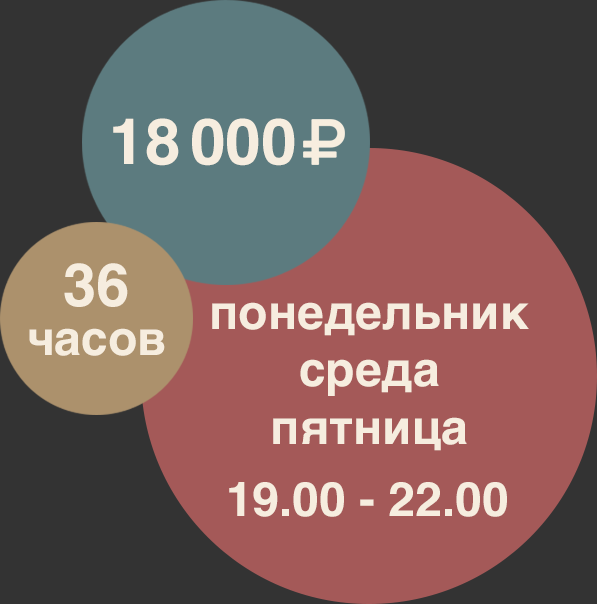
<style>
.page{position:relative;width:597px;height:604px;background:#333333}
.page>*{position:absolute;margin:0}
.t1{font:64px "Helvetica-Bold";color:#f6eddf}
.t2{font:60px "Helvetica-Bold";color:#f6eddf}
.t3{font:48px "Helvetica-Bold";color:#f6eddf}
</style>
<div class="page">
<p class="t1" style="left:113px;top:118px;width:66px;height:48px">18</p>
<p class="t1" style="left:192px;top:118px;width:103px;height:48px">000</p>
<p class="t2" style="left:64px;top:263px;width:64px;height:44px">36</p>
<p class="t3" style="left:212px;top:302px;width:317px;height:149px;text-align:center">понедельник <br>среда <br>пятница</p>
<p class="t3" style="left:29px;top:328px;width:136px;height:28px">часов</p>
<p class="t3" style="left:229px;top:482px;width:278px;height:35px">19.00 - 22.00</p>
</div>
